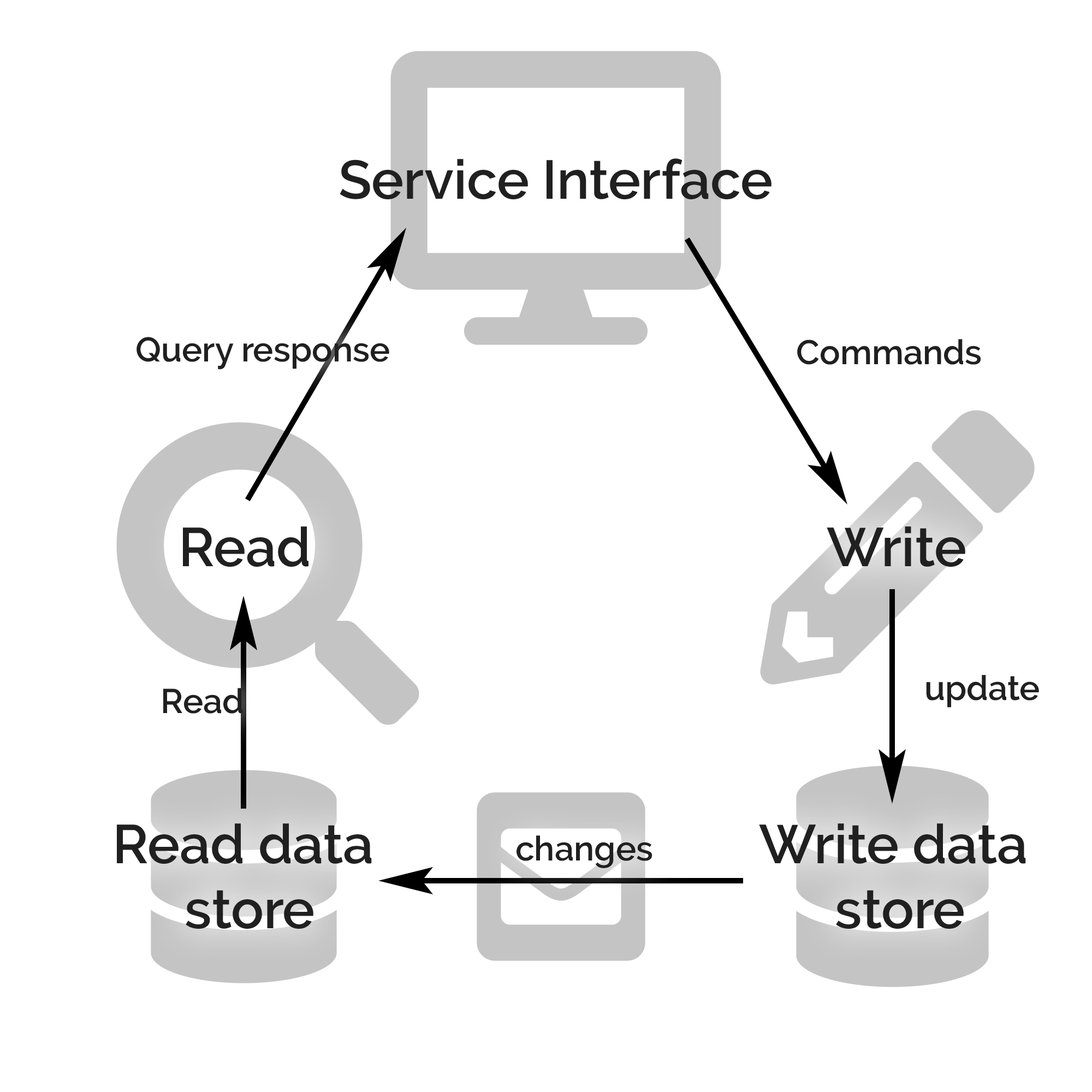
<style>
.page{position:relative;width:1092px;height:1092px;background:#ffffff}
.page>*{position:absolute;margin:0}
.t1{font:54.3px "Raleway-SemiBold";color:#202020}
.t2{font:34.1px "Raleway-SemiBold";color:#202020}
</style>
<div class="page">
<p class="t1" style="left:340px;top:158px;width:431px;height:41px">Service Interface</p>
<p class="t2" style="left:136px;top:337px;width:253px;height:33px">Query response</p>
<p class="t2" style="left:797px;top:339px;width:184px;height:26px">Commands</p>
<p class="t1" style="left:183px;top:526px;width:125px;height:41px">Read</p>
<p class="t1" style="left:827px;top:526px;width:138px;height:41px">Write</p>
<p class="t2" style="left:926px;top:675px;width:113px;height:33px">update</p>
<p class="t2" style="left:163px;top:688px;width:79px;height:26px">Read</p>
<p class="t1" style="left:117px;top:823px;width:255px;height:106px;text-align:center">Read data <br>store</p>
<p class="t1" style="left:759px;top:823px;width:267px;height:106px;text-align:center">Write data <br>store</p>
<p class="t2" style="left:517px;top:835px;width:135px;height:33px">changes</p>
</div>
